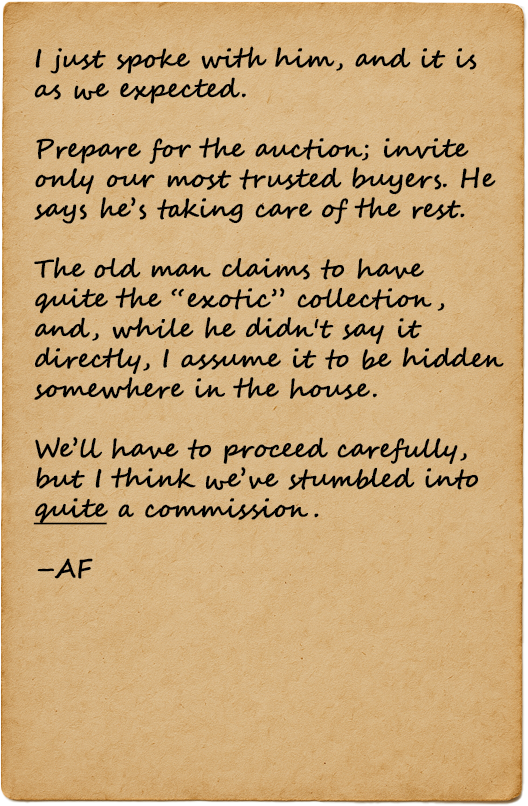
<style>
.page{position:relative;width:528px;height:806px}
.page>*{position:absolute;margin:0}
.t1{font:25px "SegoeScript";color:#000000;font-weight:bold}
.t2{font:25px "SegoeScript";color:#000000;font-weight:bold;text-decoration:underline}
</style>
<div class="page">
<p class="t1" style="left:33px;top:46px;width:471px;height:533px">I just spoke with him, and it is as we expected. <br><br>Prepare for the auction; invite only our most trusted buyers. He says he’s taking care of the rest.<br><br>The old man claims to have quite the “exotic” collection, and, while he didn't say it directly, I assume it to be hidden somewhere in the house. <br><br>We’ll have to proceed carefully, but I think we’ve stumbled into <span class="t2">quite</span> a commission. <br><br>–AF</p>
</div>
